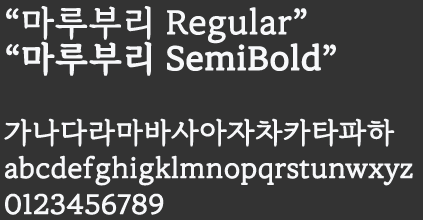
<style>
.page{position:relative;width:423px;height:220px;background:#333333}
.page>*{position:absolute;margin:0}
.t1{font:28px/36px "MaruBuri-Regular";color:#f7f8fa;font-weight:bold}
.t2{font:34px/36px "MaruBuri-Regular";color:#f7f8fa;font-weight:bold}
.t3{font:34px/36px "MaruBuri-SemiBold";color:#f7f8fa;font-weight:bold}
</style>
<div class="page">
<p class="t1" style="left:4px;top:6px;width:409px;height:209px"><span class="t2">“마루부리 Regular”<br></span><span class="t3">“마루부리 SemiBold”<br><br></span>가나다라마바사아자차카타파하<br>abcdefghigklmnopqrstunwxyz<br>0123456789</p>
</div>
